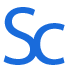
<style>
.page{position:relative;width:80px;height:80px;background:#ffffff}
.page>*{position:absolute;margin:0}
.t1{font:83.3px "MyriadPro-Regular";letter-spacing:-0.14em;color:#196bdb}
</style>
<div class="page">
<p class="t1" style="left:3px;top:7px;width:62px;height:58px">Sc</p>
</div>
